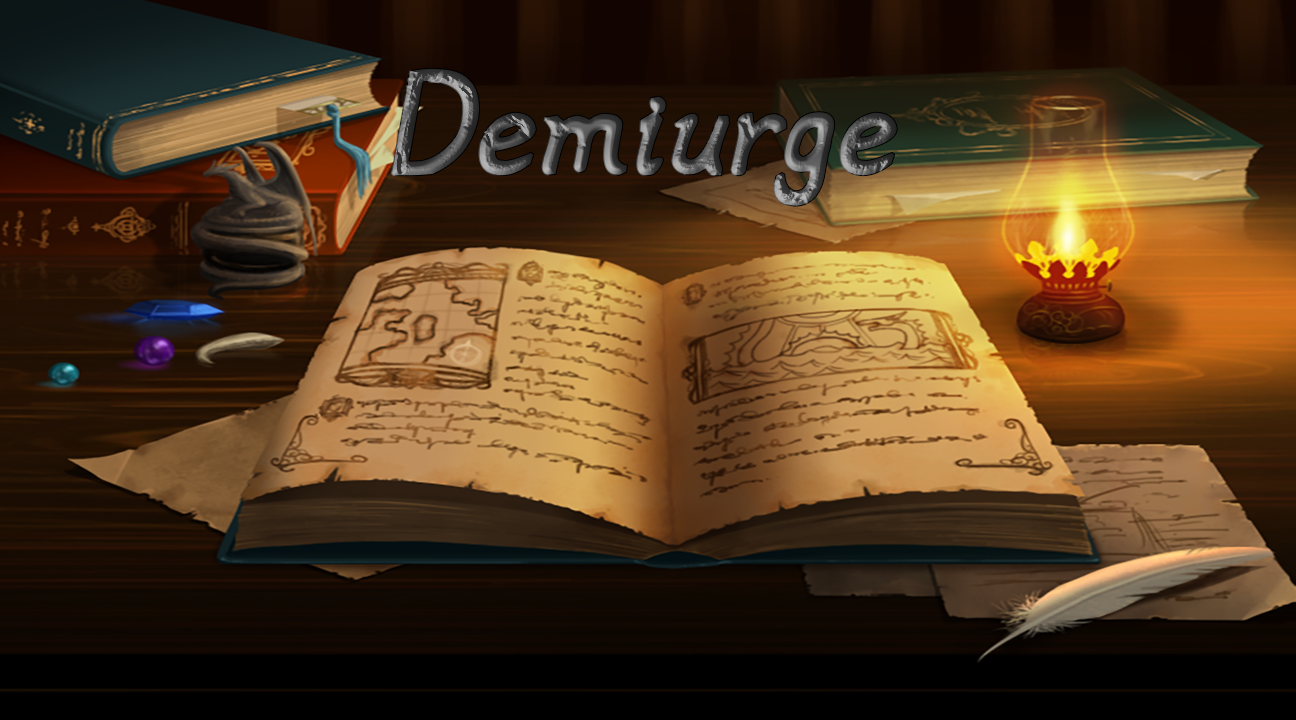
<style>
.page{position:relative;width:1296px;height:720px}
.page>*{position:absolute;margin:0}
.t1{font:159px "YRDZST-Semibold";font-weight:bold;font-style:italic}
</style>
<div class="page">
<p class="t1" style="left:391px;top:67px;width:507px;height:140px">Demiurge</p>
</div>
